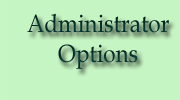
<style>
.page{position:relative;width:180px;height:100px;background:#c5f5c2}
.page>*{position:absolute;margin:0}
.t1{font:25px "BookAntiqua";color:#05332e;scale:0.9 1}
</style>
<div class="page">
<p class="t1" style="left:27px;top:13px;width:142px;height:56px;text-align:center">Administrator <br>Options</p>
</div>
